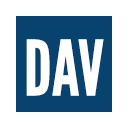
<style>
.page{position:relative;width:128px;height:128px;background:#ffffff}
.page>*{position:absolute;margin:0}
.t1{font:76.4px "LeagueGothic-Regular";color:#ffffff}
</style>
<div class="page">
<p class="t1" style="left:26px;top:39px;width:78px;height:57px">DAV</p>
</div>
